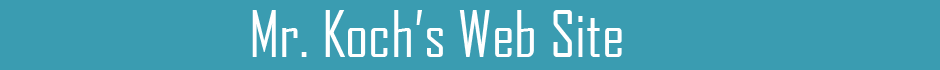
<style>
.page{position:relative;width:940px;height:70px;background:#3a9cb1}
.page>*{position:absolute;margin:0}
.t1{font:61.2px "AgencyFB-Reg";color:#ffffff}
</style>
<div class="page">
<p class="t1" style="left:252px;top:10px;width:370px;height:47px">Mr. Koch’s Web Site</p>
</div>
